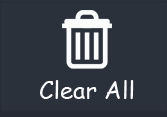
<style>
.page{position:relative;width:167px;height:117px;background:#2a313b}
.page>*{position:absolute;margin:0}
.t1{font:24px "ComicSansMS";color:#fafafb}
</style>
<div class="page">
<p class="t1" style="left:40px;top:80px;width:94px;height:19px">Clear All</p>
</div>
